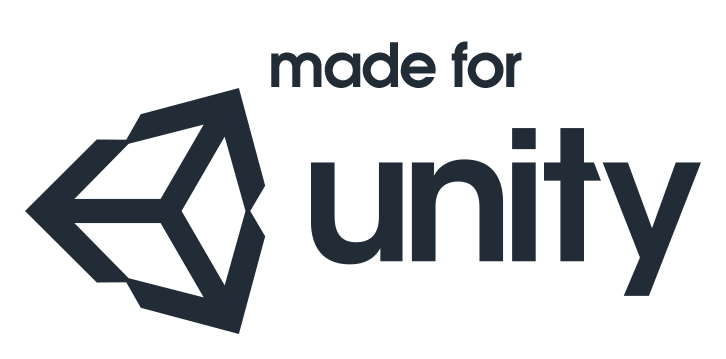
<style>
.page{position:relative;width:726px;height:359px;background:#ffffff}
.page>*{position:absolute;margin:0}
.t1{font:60.4px "AvalonBold";letter-spacing:-0.03em;color:#222c37}
</style>
<div class="page">
<p class="t1" style="left:271px;top:41px;width:251px;height:47px">made for</p>
</div>
